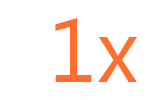
<style>
.page{position:relative;width:150px;height:100px;background:#ffffff}
.page>*{position:absolute;margin:0}
.t1{font:90px "SegoeUI";color:#ff6e2e}
</style>
<div class="page">
<p class="t1" style="left:55px;top:18px;width:82px;height:64px">1x</p>
</div>
